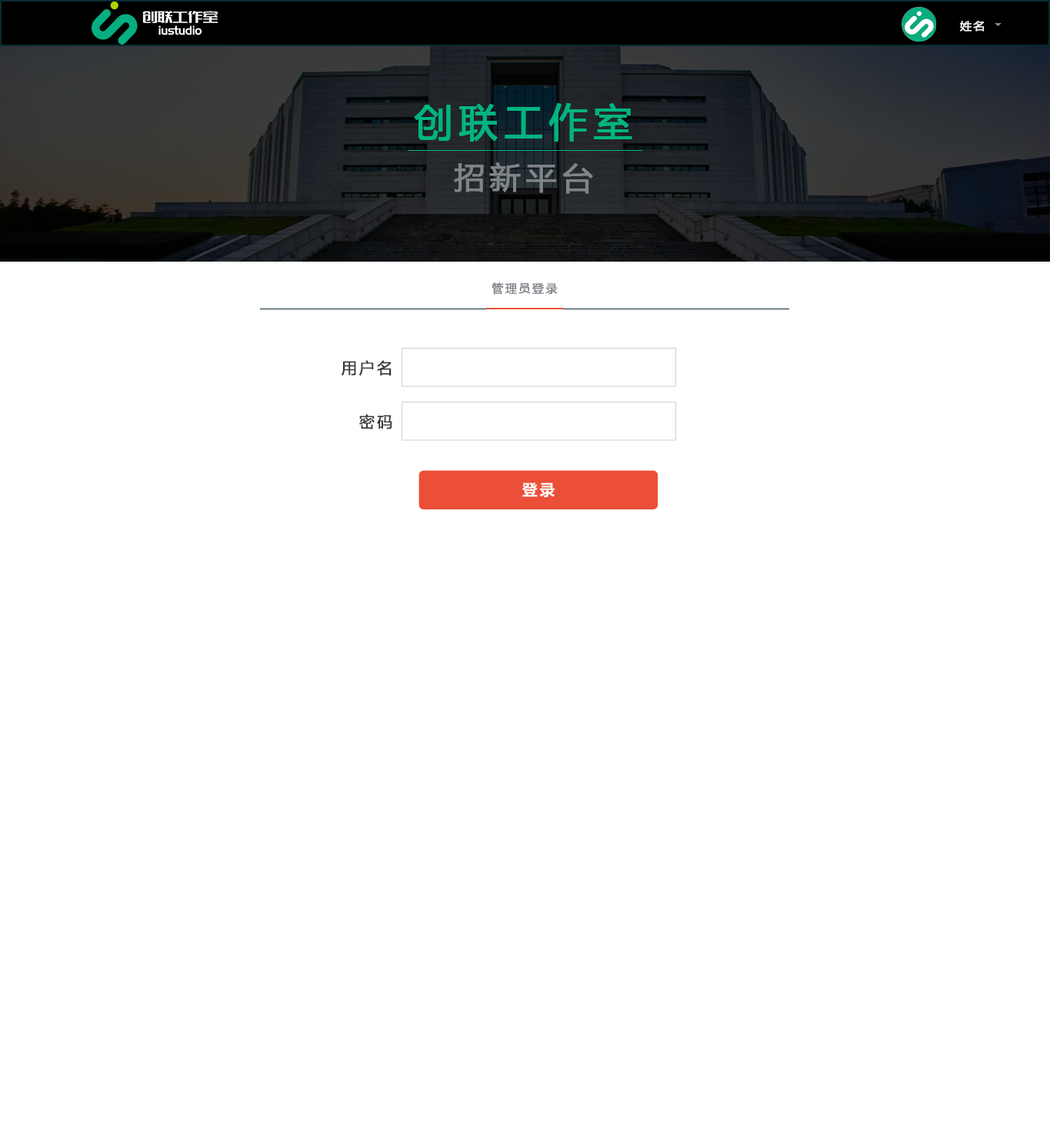
<style>
.page{position:relative;width:1050px;height:1135px;background:#ffffff}
.page>*{position:absolute;margin:0}
.t1{font:11.5px "MicrosoftYaHei";letter-spacing:0.14em;color:#eaeaea;font-weight:bold}
.t2{font:38.5px "MicrosoftYaHei";letter-spacing:0.14em;color:#00b480;font-weight:bold}
.t3{font:30.8px "MicrosoftYaHei";letter-spacing:0.14em;color:#7f8489;font-weight:bold}
.t4{font:11.5px "MicrosoftYaHei";letter-spacing:0.14em;color:#7f8489;font-weight:bold}
.t5{font:15.3px "MicrosoftYaHei";letter-spacing:0.14em;color:#363636;font-weight:bold}
</style>
<div class="page">
<p class="t1" style="left:960px;top:21px;width:25px;height:11px">姓名</p>
<p class="t2" style="left:414px;top:103px;width:219px;height:39px">创联工作室</p>
<p class="t3" style="left:454px;top:162px;width:139px;height:32px">招新平台</p>
<p class="t4" style="left:492px;top:282px;width:66px;height:13px">管理员登录</p>
<p class="t5" style="left:342px;top:360px;width:50px;height:16px">用户名</p>
<p class="t5" style="left:359px;top:414px;width:33px;height:15px">密码</p>
</div>
